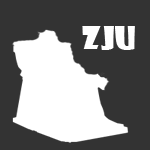
<style>
.page{position:relative;width:150px;height:150px;background:#333333}
.page>*{position:absolute;margin:0}
.t1{font:30px "ShowcardGothic-Reg";color:#ffffff}
</style>
<div class="page">
<p class="t1" style="left:82px;top:26px;width:53px;height:24px">ZJU</p>
</div>
